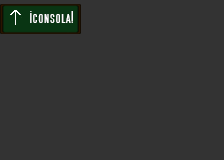
<style>
.page{position:relative;width:224px;height:160px;background:#333333}
.page>*{position:absolute;margin:0}
.t1{font:15px "SFMoviePoster";color:#fefefe}
.t2{font:1px "SFMoviePoster";color:#fefefe}
</style>
<div class="page">
<p class="t1" style="left:30px;top:11px;width:43px;height:12px"><span class="t2"><br></span>!consola¡</p>
</div>
